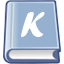
<style>
.page{position:relative;width:64px;height:64px;background:#95b1cf}
.page>*{position:absolute;margin:0}
.t1{font:36px "ForteMT";color:#ffffff}
</style>
<div class="page">
<p class="t1" style="left:21px;top:12px;width:24px;height:25px">K</p>
</div>
